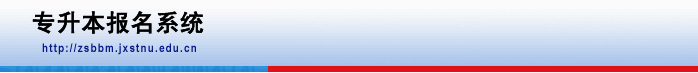
<style>
.page{position:relative;width:698px;height:73px}
.page>*{position:absolute;margin:0}
.t1{font:24px "SimHei";color:#000000;font-weight:bold}
.t2{font:12px "ArialNarrow-Bold";letter-spacing:0.1em;color:#061987}
</style>
<div class="page">
<p class="t1" style="left:32px;top:11px;width:172px;height:23px">专升本报名系统</p>
<p class="t2" style="left:42px;top:43px;width:154px;height:12px">http://zsbbm.jxstnu.edu.cn</p>
</div>
